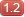
<style>
.page{position:relative;width:24px;height:17px}
.page>*{position:absolute;margin:0}
.t1{font:12px "ArialMT";color:#ffffff}
</style>
<div class="page">
<p class="t1" style="left:4px;top:3px;width:16px;height:9px">1.2</p>
</div>
